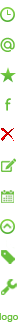
<style>
.page{position:relative;width:22px;height:330px;background:#ffffff}
.page>*{position:absolute;margin:0}
.t1{font:10px "ArialMT";color:#67bf3b}
</style>
<div class="page">
<p class="t1" style="left:0px;top:313px;width:18px;height:9px">logo</p>
</div>
